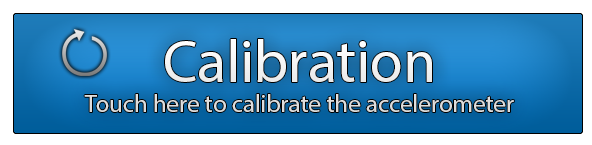
<style>
.page{position:relative;width:592px;height:145px}
.page>*{position:absolute;margin:0}
.t1{font:24.8px "MyriadPro-Regular";color:#ffffff}
.t2{font:59.8px "MyriadPro-Regular";color:#ffffff}
</style>
<div class="page">
<p class="t1" style="left:84px;top:39px;width:430px;height:73px;text-align:center"><span class="t2">Calibration<br></span>Touch here to calibrate the accelerometer</p>
</div>
